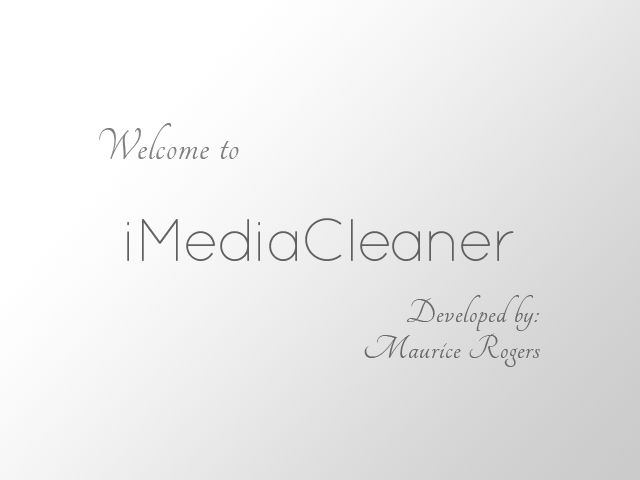
<style>
.page{position:relative;width:640px;height:480px}
.page>*{position:absolute;margin:0}
.t1{font:48px "Tangerine";letter-spacing:0.025em;color:#818181}
.t2{font:60px "QuicksandLight-Regular";letter-spacing:-0.05em;color:#606060}
.t3{font:36px/36px "Tangerine";letter-spacing:0.025em;color:#696969}
</style>
<div class="page">
<p class="t1" style="left:99px;top:123px;width:140px;height:36px">Welcome to</p>
<p class="t2" style="left:127px;top:218px;width:387px;height:43px">iMediaCleaner</p>
<p class="t3" style="left:364px;top:295px;width:176px;height:72px;text-align:right">Developed by:<br>Maurice Rogers</p>
</div>
